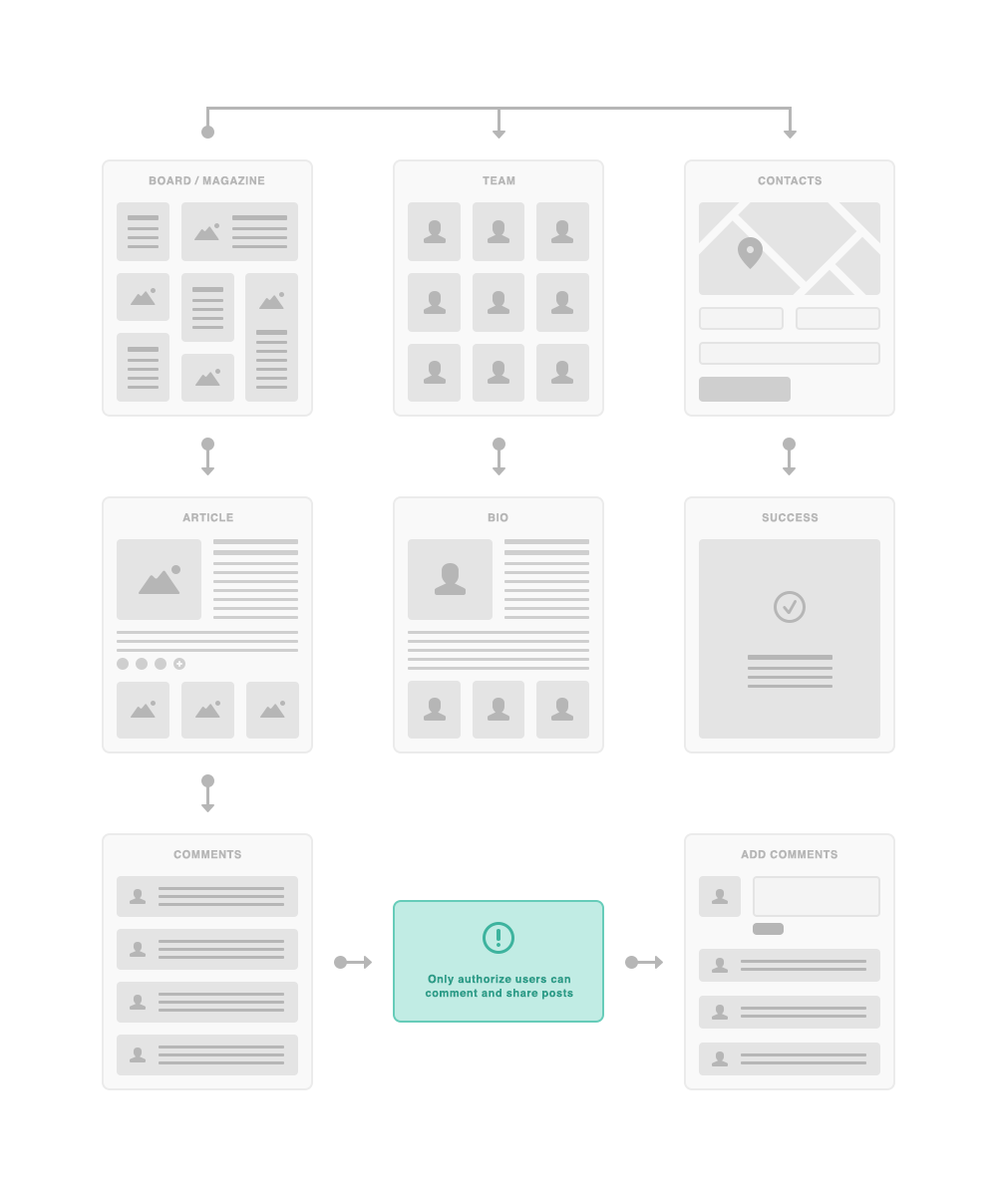
<style>
.page{position:relative;width:997px;height:1196px;background:#ffffff}
.page>*{position:absolute;margin:0}
.t1{font:11px "Helvetica-Bold";letter-spacing:0.05em;color:#b6b6b6;text-transform:uppercase}
.t2{font:11px/14px "Helvetica-Bold";letter-spacing:0.05em;color:#2b9c88}
</style>
<div class="page">
<p class="t1" style="left:149px;top:175px;width:116px;height:10px">Board / magazine</p>
<p class="t1" style="left:482px;top:176px;width:33px;height:9px">Team</p>
<p class="t1" style="left:758px;top:175px;width:63px;height:10px">Contacts</p>
<p class="t1" style="left:182px;top:513px;width:51px;height:9px">Article</p>
<p class="t1" style="left:487px;top:512px;width:21px;height:10px">Bio</p>
<p class="t1" style="left:762px;top:513px;width:56px;height:9px">Success</p>
<p class="t1" style="left:173px;top:849px;width:68px;height:10px">Comments</p>
<p class="t1" style="left:741px;top:849px;width:96px;height:10px">ADD COMMENTS</p>
<p class="t2" style="left:425px;top:974px;width:148px;height:26px;text-align:center">Only authorize users can<br>comment and share posts</p>
</div>
